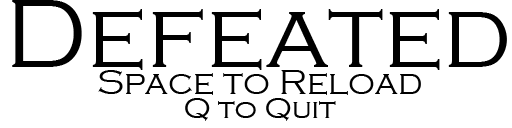
<style>
.page{position:relative;width:512px;height:128px;background:#ffffff}
.page>*{position:absolute;margin:0}
.t1{font:100px "CopperplateGothic-Light";color:#000000}
.t2{font:36px/24px "CopperplateGothic-Light";color:#000000}
.t3{font:30px/24px "CopperplateGothic-Light";color:#000000}
</style>
<div class="page">
<p class="t1" style="left:12px;top:0px;width:495px;height:70px">Defeated</p>
<p class="t2" style="left:98px;top:70px;width:323px;height:51px;text-align:center">Space to Reload<br><span class="t3">Q to Quit</span></p>
</div>
